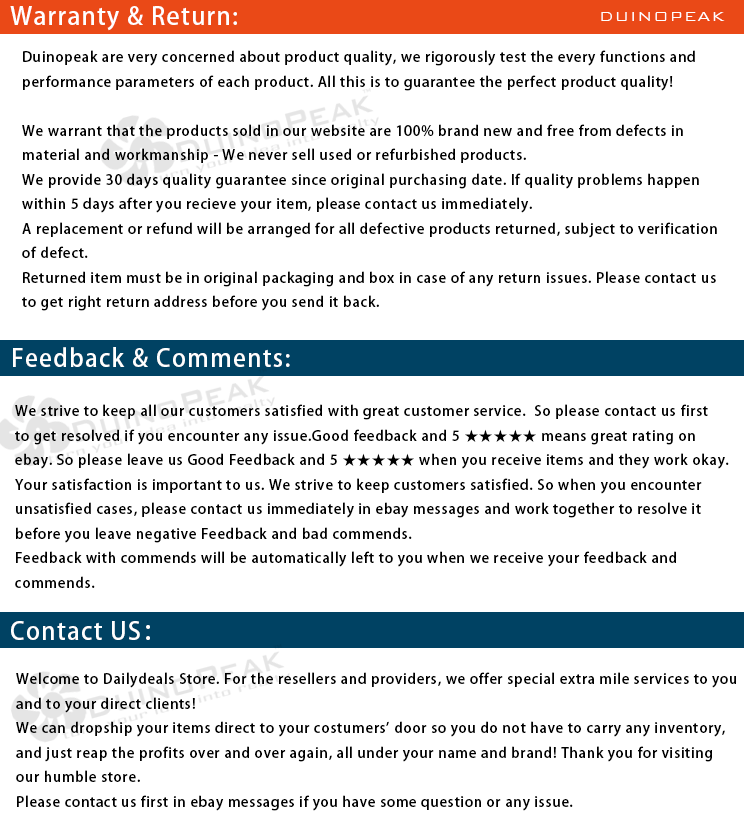
<style>
.page{position:relative;width:744px;height:838px;background:#ffffff}
.page>*{position:absolute;margin:0}
.t1{font:24px "AdobeHeitiStd-Regular";letter-spacing:0.05em;color:#ffffff}
.t2{font:18px "BankGothicBT-Light";letter-spacing:0.05em;color:#ffffff}
.t3{font:14px "AdobeHeitiStd-Regular";letter-spacing:0.05em;color:#000000}
</style>
<div class="page">
<p class="t1" style="left:10px;top:6px;width:227px;height:25px">Warranty &amp; Return:</p>
<p class="t2" style="left:601px;top:12px;width:124px;height:9px">DUINOPEAK</p>
<p class="t3" style="left:22px;top:50px;width:695px;height:261px">Duinopeak are very concerned about product quality, we rigorously test the every functions and <br>performance parameters of each product. All this is to guarantee the perfect product quality! <br><br>We warrant that the products sold in our website are 100% brand new and free from defects in <br>material and workmanship - We never sell used or refurbished products.<br>We provide 30 days quality guarantee since original purchasing date. If quality problems happen <br>within 5 days after you recieve your item, please contact us immediately.<br>A replacement or refund will be arranged for all defective products returned, subject to verification <br>of defect.<br>Returned item must be in original packaging and box in case of any return issues. Please contact us <br>to get right return address before you send it back.</p>
<p class="t1" style="left:13px;top:347px;width:277px;height:20px">Feedback &amp; Comments:</p>
<p class="t3" style="left:15px;top:404px;width:714px;height:184px">We strive to keep all our customers satisfied with great customer service.  So please contact us first <br>to get resolved if you encounter any issue.Good feedback and 5 ★★★★★ means great rating on <br>ebay. So please leave us Good Feedback and 5 ★★★★★ when you receive items and they work okay.<br>Your satisfaction is important to us. We strive to keep customers satisfied. So when you encounter <br>unsatisfied cases, please contact us immediately in ebay messages and work together to resolve it <br>before you leave negative Feedback and bad commends.<br>Feedback with commends will be automatically left to you when we receive your feedback and <br>commends.</p>
<p class="t1" style="left:11px;top:621px;width:139px;height:19px">Contact US：</p>
<p class="t3" style="left:16px;top:672px;width:720px;height:139px">Welcome to Dailydeals Store. For the resellers and providers, we offer special extra mile services to you <br>and to your direct clients!<br>We can dropship your items direct to your costumers' door so you do not have to carry any inventory, <br>and just reap the profits over and over again, all under your name and brand! Thank you for visiting <br>our humble store.<br>Please contact us first in ebay messages if you have some question or any issue.</p>
</div>
